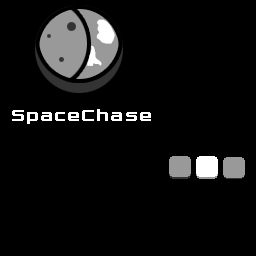
<style>
.page{position:relative;width:256px;height:256px;background:#000000}
.page>*{position:absolute;margin:0}
.t1{font:16px "Axion";color:#ffffff;font-weight:bold}
</style>
<div class="page">
<p class="t1" style="left:12px;top:109px;width:139px;height:15px">SpaceChase</p>
</div>
